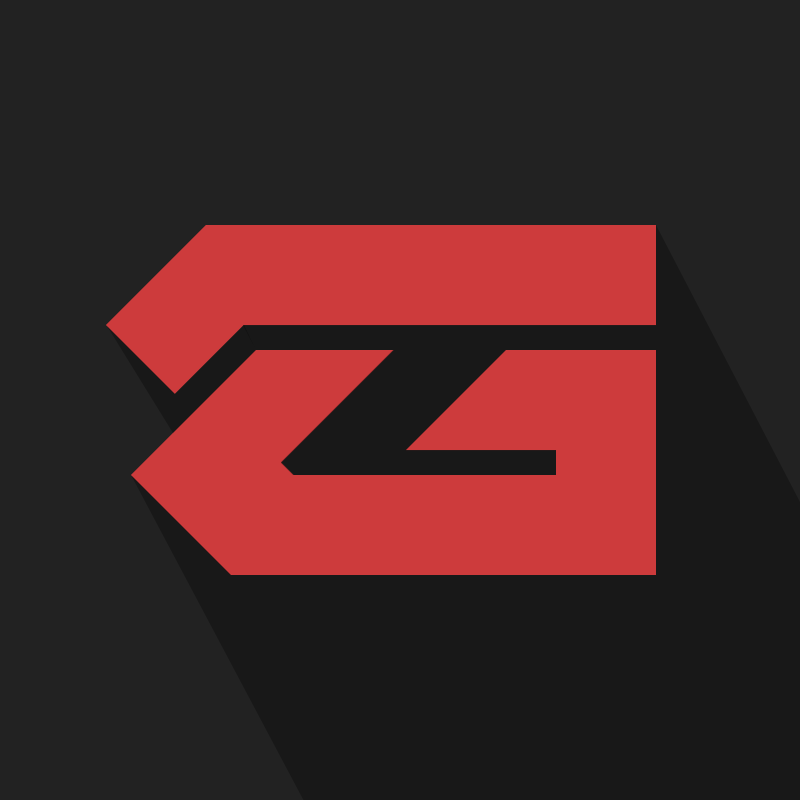
<style>
.page{position:relative;width:800px;height:800px;background:#222222}
.page>*{position:absolute;margin:0}
.t1{font:400px "Critical-Mass-LDR";color:#cd3b3c}
</style>
<div class="page">
<p class="t1" style="left:106px;top:225px;width:550px;height:350px">G</p>
</div>
